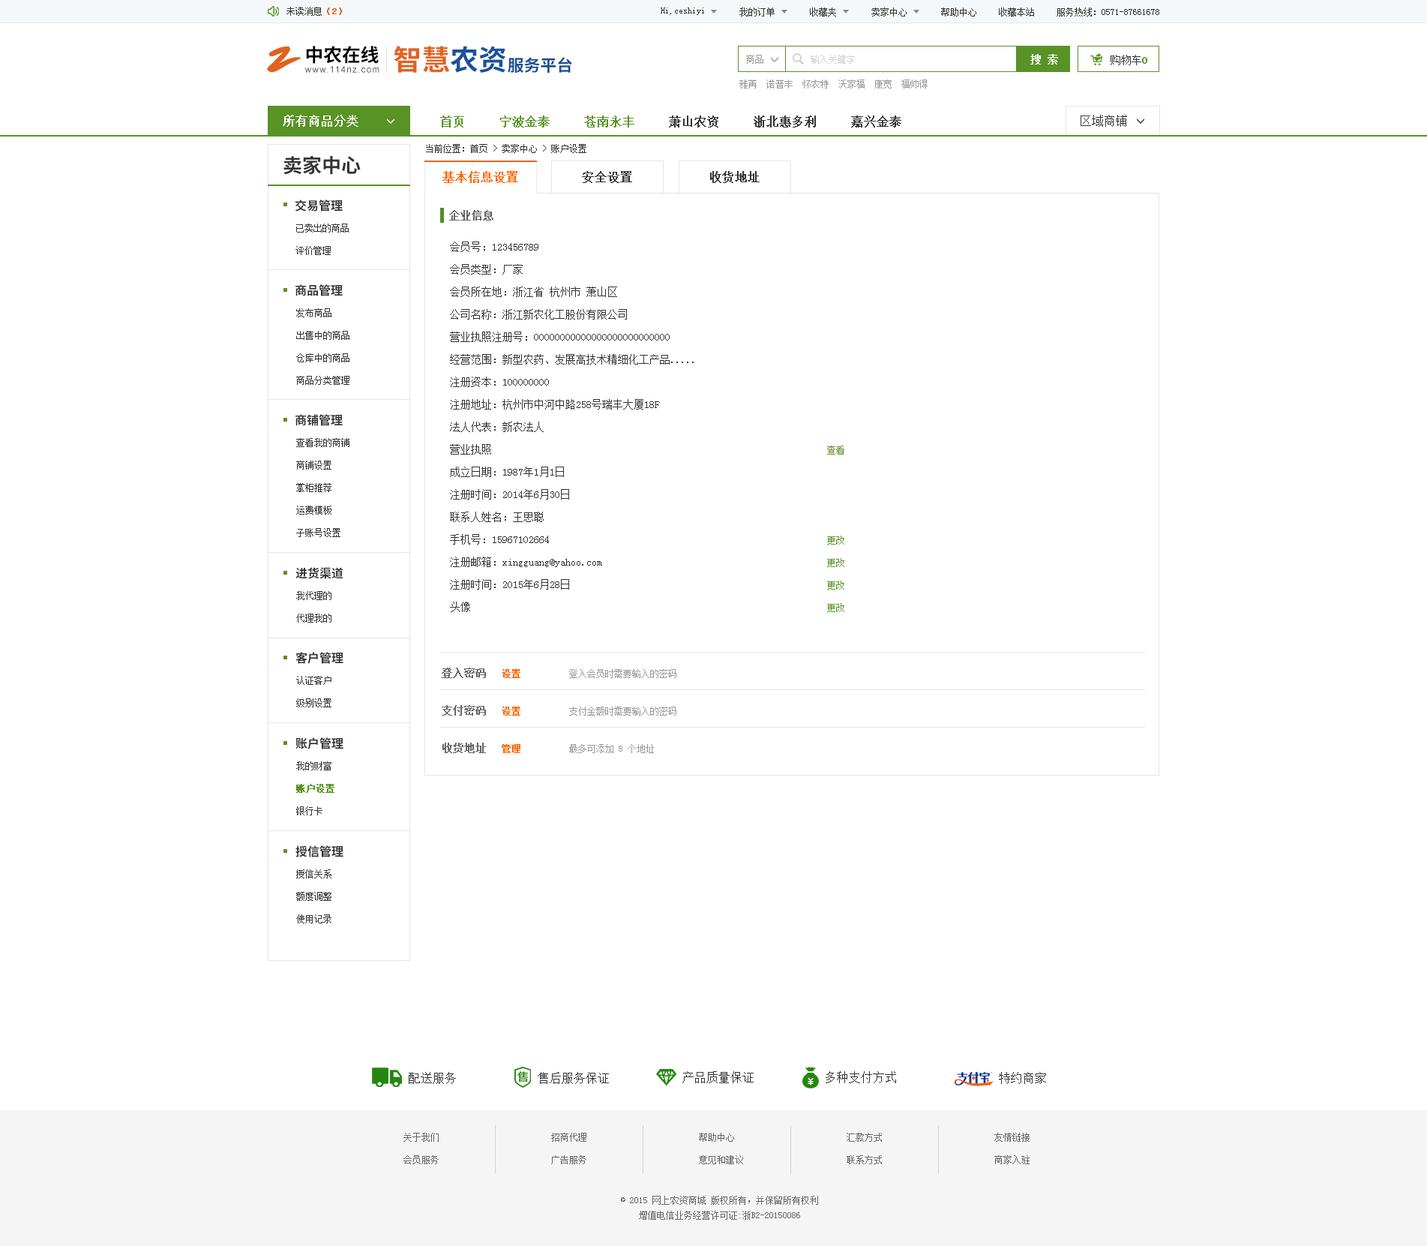
<style>
.page{position:relative;width:1427px;height:1246px;background:#ffffff}
.page>*{position:absolute;margin:0}
.t1{font:9px "SimSun";color:#333333}
.t2{font:9px "SimSun";color:#e0631f;font-weight:bold}
.t3{font:38px "SmudgerLetPlain";color:#e0631f}
.t4{font:18.6px "SourceHanSansCN-Bold";color:#060001}
.t5{font:28.4px "SourceHanSansCN-Bold";color:#e0631f}
.t6{font:28.4px "SourceHanSansCN-Bold";color:#1a529c}
.t7{font:10.5px "SimSun";color:#ffffff;font-weight:bold}
.t8{font:16.3px "SourceHanSansCN-Bold";color:#194f93}
.t9{font:9px "SimSun";color:#999999}
.t10{font:9px "SimSun";color:#d1d1d1}
.t11{font:10.5px "SimSun";color:#333333}
.t12{font:10.5px "SimSun";color:#589325;font-weight:bold}
.t13{font:8.9px "ArialMT";letter-spacing:0.1em;color:#585859}
.t14{font:12px "SimSun";color:#ffffff;font-weight:bold}
.t15{font:12px "SimSun";color:#333333;font-weight:bold}
.t16{font:12px "SimSun";color:#589325;font-weight:bold}
.t17{font:12px "SimSun";color:#333333}
.t18{font:19.5px "SourceHanSansCN-Bold";color:#333333}
.t19{font:12px "SimSun";color:#ff6600;font-weight:bold}
.t20{font:12px "SourceHanSansCN-Bold";color:#333333}
.t21{font:10.5px "SimSun";color:#666666;font-weight:bold}
.t22{font:9px/22.5px "SimSun";color:#333333}
.t23{font:10.5px/22.5px "SimSun";color:#333333}
.t24{font:9px/22.5px "SimSun";color:#589325}
.t25{font:9px "SimSun";color:#ff6600;font-weight:bold}
.t26{font:9px/22.5px "SimSun";color:#589325;font-weight:bold}
.t27{font:9px/22.5px "SimSun";color:#666666}
.t28{font:9px/15px "SimSun";color:#666666}
</style>
<div class="page">
<p class="t1" style="left:286px;top:7px;width:56px;height:9px">未读消息<span class="t2">（2）</span></p>
<p class="t1" style="left:661px;top:8px;width:43px;height:7px">Hi,ceshiyi</p>
<p class="t1" style="left:740px;top:8px;width:35px;height:8px">我的订单</p>
<p class="t1" style="left:810px;top:8px;width:26px;height:8px">收藏夹</p>
<p class="t1" style="left:872px;top:8px;width:35px;height:8px">卖家中心</p>
<p class="t1" style="left:941px;top:8px;width:35px;height:8px">帮助中心</p>
<p class="t1" style="left:999px;top:8px;width:35px;height:8px">收藏本站</p>
<p class="t1" style="left:1057px;top:8px;width:103px;height:8px">服务热线：0571-87661678</p>
<p class="t3" style="left:267px;top:46px;width:35px;height:27px">Z</p>
<p class="t4" style="left:306px;top:46px;width:73px;height:18px">中农在线</p>
<p class="t5" style="left:394px;top:46px;width:112px;height:27px">智慧<span class="t6">农资</span></p>
<p class="t7" style="left:1030px;top:54px;width:28px;height:10px">搜 索</p>
<p class="t8" style="left:508px;top:57px;width:64px;height:16px">服务平台</p>
<p class="t9" style="left:746px;top:55px;width:18px;height:9px">商品</p>
<p class="t10" style="left:811px;top:55px;width:44px;height:9px">输入关键字</p>
<p class="t11" style="left:1111px;top:55px;width:37px;height:10px">购物车<span class="t12">0</span></p>
<p class="t13" style="left:304px;top:66px;width:76px;height:7px">www.114nz.com</p>
<p class="t9" style="left:740px;top:80px;width:188px;height:8px">雅苒  诺普丰  怀农特  沃家福  康宽  福帅得</p>
<p class="t14" style="left:283px;top:115px;width:75px;height:12px">所有商品分类</p>
<p class="t15" style="left:440px;top:116px;width:462px;height:12px"><span class="t16">首页     宁波金泰     苍南永丰    </span> 萧山农资     浙北惠多利     嘉兴金泰</p>
<p class="t17" style="left:1081px;top:115px;width:46px;height:12px">区域商铺</p>
<p class="t1" style="left:426px;top:144px;width:160px;height:9px">当前位置：首页 &gt; 卖家中心 &gt; 账户设置</p>
<p class="t18" style="left:284px;top:155px;width:77px;height:20px">卖家中心</p>
<p class="t19" style="left:442px;top:171px;width:76px;height:12px">基本信息设置</p>
<p class="t15" style="left:582px;top:171px;width:50px;height:12px">安全设置</p>
<p class="t15" style="left:710px;top:171px;width:50px;height:12px">收货地址</p>
<p class="t20" style="left:295px;top:200px;width:48px;height:12px">交易管理</p>
<p class="t21" style="left:449px;top:210px;width:45px;height:10px">企业信息</p>
<p class="t22" style="left:296px;top:224px;width:53px;height:31px">已卖出的商品<br>评价管理</p>
<p class="t23" style="left:450px;top:242px;width:244px;height:370px">会员号：123456789<br>会员类型：厂家<br>会员所在地：浙江省 杭州市 萧山区<br>公司名称：浙江新农化工股份有限公司<br>营业执照注册号：00000000000000000000000000<br>经营范围：新型农药、发展高技术精细化工产品.....<br>注册资本：100000000<br>注册地址：杭州市中河中路258号瑞丰大厦18F<br>法人代表：新农法人<br>营业执照<br>成立日期：1987年1月1日<br>注册时间：2014年6月30日<br>联系人姓名：王思聪<br>手机号：15967102664<br>注册邮箱：xingguang@yahoo.com<br>注册时间：2015年6月28日<br>头像</p>
<p class="t20" style="left:296px;top:284px;width:47px;height:12px">商品管理</p>
<p class="t22" style="left:296px;top:308px;width:54px;height:77px">发布商品<br>出售中的商品<br>仓库中的商品<br>商品分类管理</p>
<p class="t20" style="left:296px;top:414px;width:47px;height:12px">商铺管理</p>
<p class="t22" style="left:296px;top:438px;width:54px;height:99px">查看我的商铺<br>商铺设置<br>掌柜推荐<br>运费模板<br>子账号设置</p>
<p class="t24" style="left:827px;top:446px;width:17px;height:166px">查看<br><br><br><br>更改 <br>更改<br>更改<br>更改</p>
<p class="t20" style="left:296px;top:567px;width:48px;height:12px">进货渠道</p>
<p class="t22" style="left:296px;top:591px;width:36px;height:31px">我代理的<br>代理我的</p>
<p class="t20" style="left:296px;top:652px;width:48px;height:12px">客户管理</p>
<p class="t22" style="left:296px;top:676px;width:36px;height:31px">认证客户<br>级别设置</p>
<p class="t21" style="left:442px;top:668px;width:44px;height:10px">登入密码</p>
<p class="t25" style="left:502px;top:669px;width:18px;height:9px">设置</p>
<p class="t9" style="left:569px;top:669px;width:107px;height:9px">登入会员时需要输入的密码</p>
<p class="t21" style="left:442px;top:705px;width:44px;height:11px">支付密码</p>
<p class="t25" style="left:502px;top:706px;width:18px;height:10px">设置</p>
<p class="t9" style="left:569px;top:706px;width:107px;height:10px">支付金额时需要输入的密码</p>
<p class="t20" style="left:296px;top:737px;width:48px;height:12px">账户管理</p>
<p class="t21" style="left:442px;top:742px;width:44px;height:11px">收货地址</p>
<p class="t25" style="left:502px;top:744px;width:18px;height:9px">管理</p>
<p class="t9" style="left:569px;top:744px;width:85px;height:9px">最多可添加 8 个地址</p>
<p class="t22" style="left:296px;top:761px;width:38px;height:54px">我的财富<br><span class="t26">账户设置<br></span>银行卡</p>
<p class="t20" style="left:296px;top:845px;width:48px;height:12px">授信管理</p>
<p class="t22" style="left:296px;top:869px;width:36px;height:54px">授信关系<br>额度调整<br>使用记录</p>
<p class="t17" style="left:409px;top:1072px;width:47px;height:12px">配送服务</p>
<p class="t17" style="left:538px;top:1072px;width:71px;height:12px">售后服务保证</p>
<p class="t17" style="left:682px;top:1071px;width:72px;height:12px">产品质量保证</p>
<p class="t17" style="left:826px;top:1071px;width:70px;height:12px">多种支付方式</p>
<p class="t17" style="left:999px;top:1072px;width:47px;height:12px">特约商家</p>
<p class="t27" style="left:404px;top:1132px;width:35px;height:32px">关于我们<br>会员服务</p>
<p class="t27" style="left:551px;top:1132px;width:35px;height:32px">招商代理<br>广告服务</p>
<p class="t27" style="left:699px;top:1132px;width:44px;height:32px">帮助中心<br>意见和建议</p>
<p class="t27" style="left:847px;top:1132px;width:35px;height:32px">汇款方式<br>联系方式</p>
<p class="t27" style="left:994px;top:1132px;width:36px;height:32px">友情链接<br>商家入驻</p>
<p class="t28" style="left:621px;top:1196px;width:197px;height:24px;text-align:center">© 2015 网上农资商城 版权所有，并保留所有权利<br>增值电信业务经营许可证:浙B2-20150086</p>
</div>
